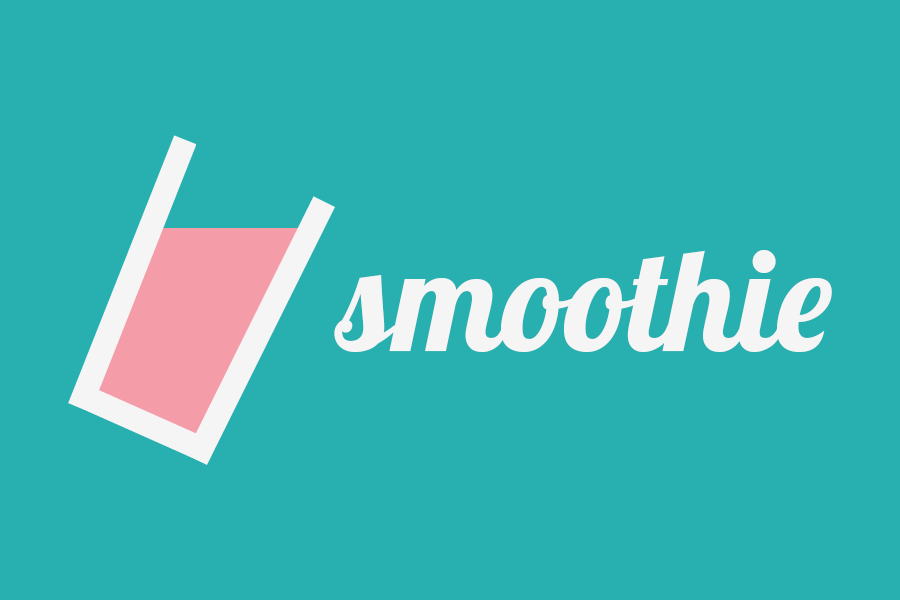
<style>
.page{position:relative;width:900px;height:600px;background:#28afb0}
.page>*{position:absolute;margin:0}
.t1{font:144px "Lobster-Regular";color:#f5f5f5}
</style>
<div class="page">
<p class="t1" style="left:334px;top:250px;width:498px;height:102px">smoothie</p>
</div>
